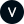
<style>
.page{position:relative;width:24px;height:24px;background:#000e18}
.page>*{position:absolute;margin:0}
.t1{font:13.2px "RawengulkBold";letter-spacing:-0.05em;color:#ffffff}
</style>
<div class="page">
<p class="t1" style="left:8px;top:7px;width:9px;height:10px">V</p>
</div>
